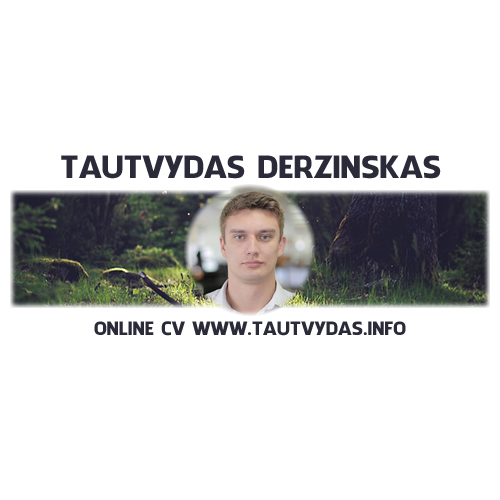
<style>
.page{position:relative;width:500px;height:500px;background:#ffffff}
.page>*{position:absolute;margin:0}
.t1{font:30px "FacebookLetterFaces";color:#2a2a38;text-transform:uppercase}
.t2{font:18px "FacebookLetterFaces";color:#2a2a38;text-transform:uppercase}
</style>
<div class="page">
<p class="t1" style="left:61px;top:155px;width:380px;height:24px">Tautvydas derzinskas</p>
<p class="t2" style="left:94px;top:321px;width:312px;height:15px">online cv www.tautvydas.info</p>
</div>
